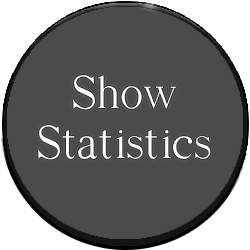
<style>
.page{position:relative;width:250px;height:250px;background:#4b4b4b}
.page>*{position:absolute;margin:0}
.t1{font:48px "EuroRoman";color:#ffffff}
</style>
<div class="page">
<p class="t1" style="left:73px;top:75px;width:103px;height:35px">Show</p>
<p class="t1" style="left:38px;top:125px;width:173px;height:35px">Statistics</p>
</div>
